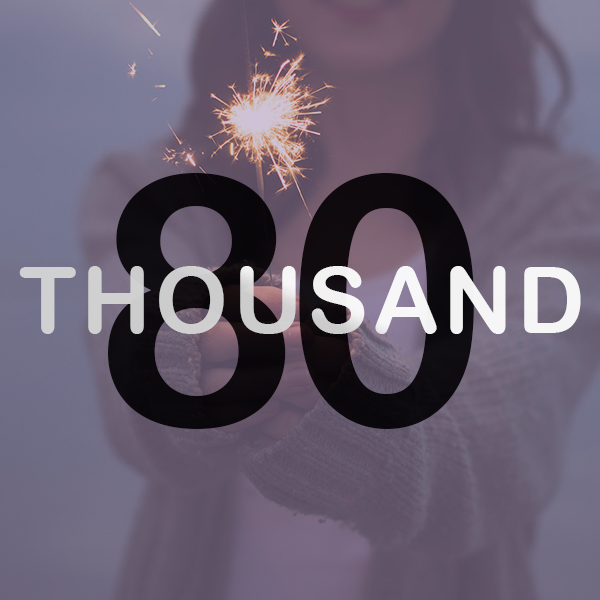
<style>
.page{position:relative;width:600px;height:600px}
.page>*{position:absolute;margin:0}
.t1{font:348.9px "ArialRoundedMTBold";letter-spacing:-0.05em;color:#000000}
.t2{font:91.8px "ArialRoundedMTBold";letter-spacing:0.05em}
</style>
<div class="page">
<p class="t1" style="left:108px;top:173px;width:366px;height:256px;opacity:0.92">80</p>
<p class="t2" style="left:19px;top:266px;width:562px;height:68px">THOUSAND</p>
</div>
